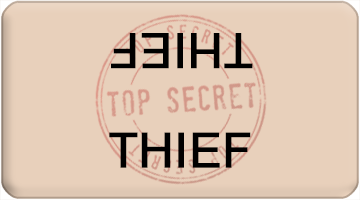
<style>
.page{position:relative;width:360px;height:200px;background:#e8d0bb}
.page>*{position:absolute;margin:0}
.t1{font:48px "ArialMT";color:#000000;font-weight:bold}
</style>
<div class="page">
<p class="t1" style="left:111px;top:33px;width:142px;height:36px;rotate:180deg">THIEF</p>
<p class="t1" style="left:109px;top:132px;width:142px;height:36px">THIEF</p>
</div>
